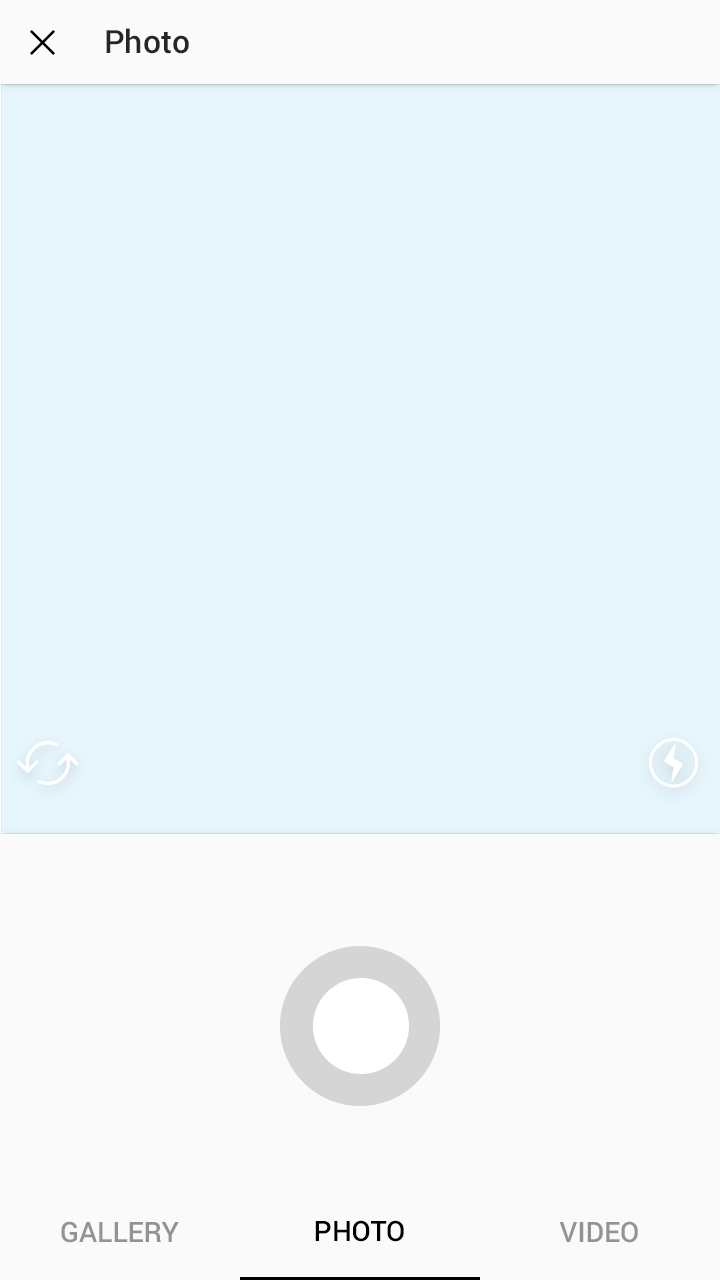
<style>
.page{position:relative;width:720px;height:1280px;background:#e6f6fc}
.page>*{position:absolute;margin:0}
.t1{font:32px "Roboto-Medium";color:#262626}
.t2{font:28px "Roboto-Medium";color:#939393;text-transform:uppercase}
.t3{font:28px "Roboto-Medium";color:#000000;text-transform:uppercase}
</style>
<div class="page">
<p class="t1" style="left:106px;top:28px;width:83px;height:26px">Photo</p>
<p class="t2" style="left:61px;top:1221px;width:118px;height:22px">Gallery</p>
<p class="t3" style="left:315px;top:1220px;width:89px;height:22px">Photo</p>
<p class="t2" style="left:559px;top:1221px;width:79px;height:22px">Video</p>
</div>
